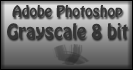
<style>
.page{position:relative;width:133px;height:70px}
.page>*{position:absolute;margin:0}
.t1{font:14px "HoboStd";color:#353535}
.t2{font:18px "HoboStd";color:#353535}
</style>
<div class="page">
<p class="t1" style="left:7px;top:5px;width:121px;height:34px;text-align:center">Adobe Photoshop<br><span class="t2">Grayscale 8 bit</span></p>
</div>
